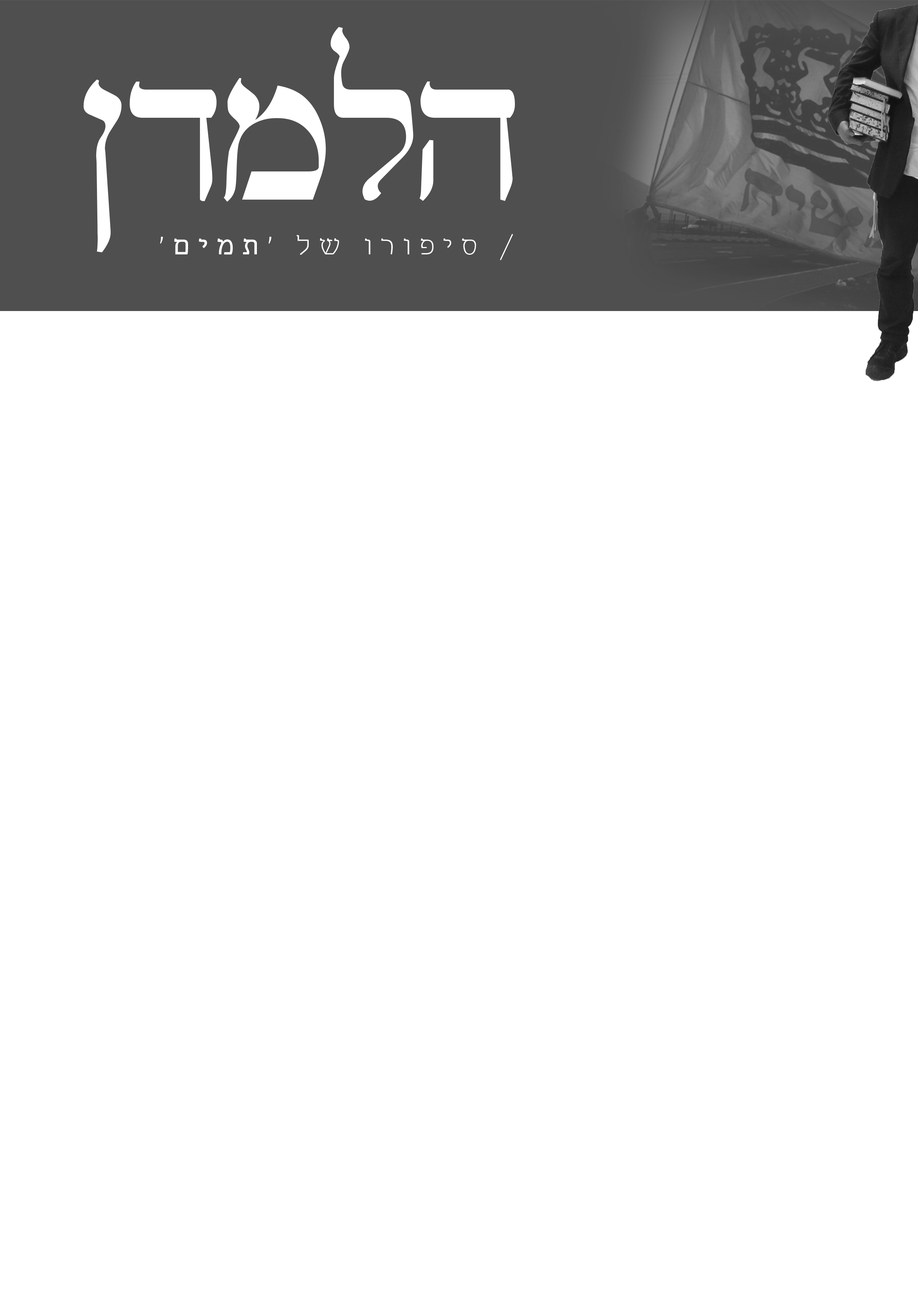
<style>
.page{position:relative;width:918px;height:1299px;background:#ffffff}
.page>*{position:absolute;margin:0}
.t1{font:190.2px "GuttmanVilna";letter-spacing:-0.05em;color:#ffffff}
.t2{font:26.3px "MekomiAAA-Light";letter-spacing:0.3em;color:#ffffff}
.t3{font:26.3px "MekomiAAA-Medium";letter-spacing:0.3em;color:#ffffff}
</style>
<div class="page">
<p class="t1" style="left:83px;top:27px;width:432px;height:225px">הלמדן</p>
<p class="t2" style="left:160px;top:234px;width:353px;height:26px">/ סיפורו של ‘<span class="t3">תמים</span>’</p>
</div>
